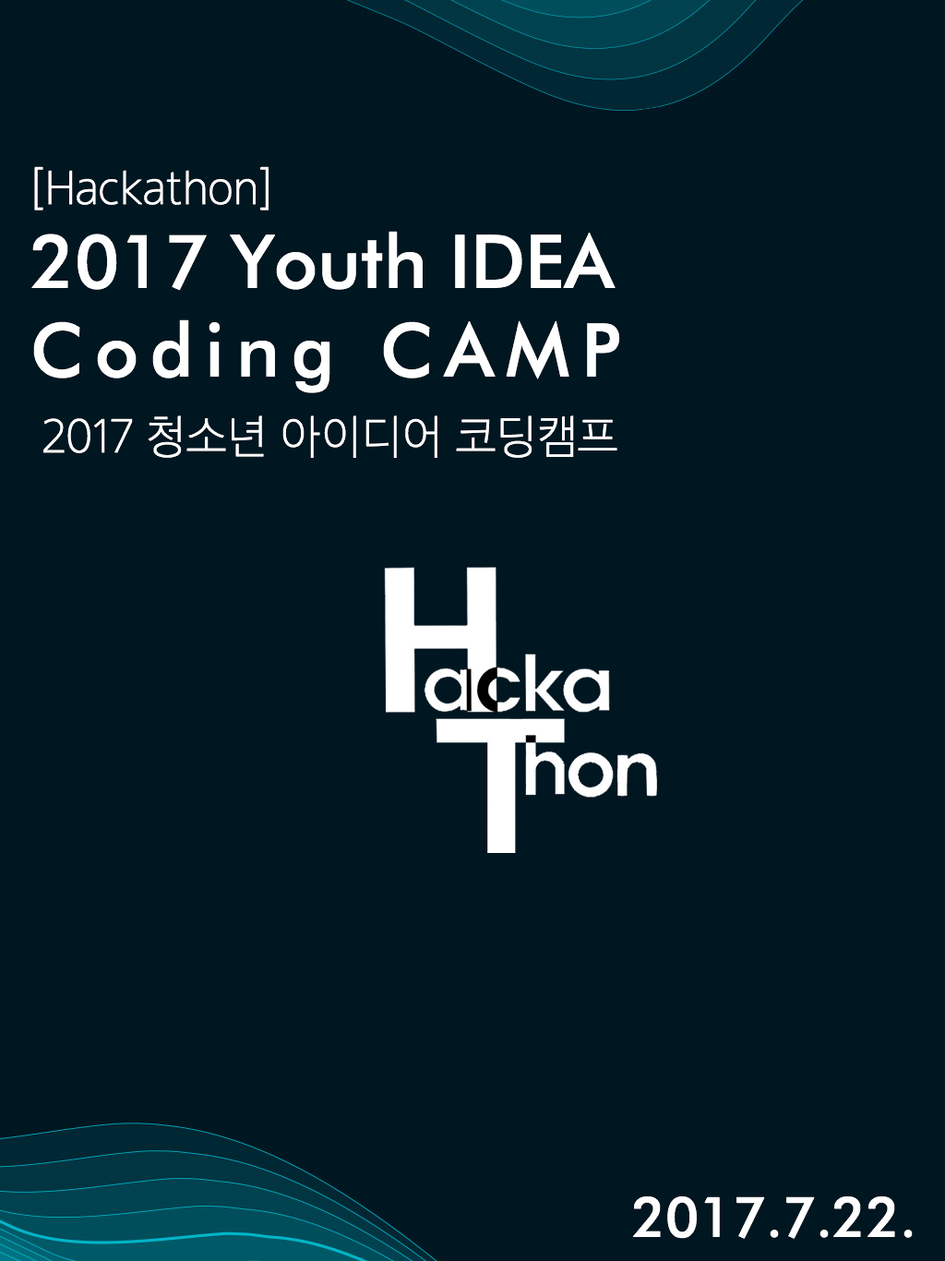
<style>
.page{position:relative;width:945px;height:1261px;background:#001621}
.page>*{position:absolute;margin:0}
.t1{font:44.3px "SECGCOTFUL";letter-spacing:0.02em;color:#ffffff}
.t2{font:73.9px "FuturaBT-Medium";color:#ffffff}
.t3{font:73.9px "FuturaBT-Medium";letter-spacing:0.16em;color:#ffffff}
.t4{font:55.4px "FuturaBT-Medium";color:#ffffff}
</style>
<div class="page">
<p class="t1" style="left:34px;top:166px;width:235px;height:45px">[Hackathon]</p>
<p class="t2" style="left:31px;top:231px;width:589px;height:162px">2017 Youth IDEA <br><span class="t3">Coding CAMP</span></p>
<p class="t1" style="left:43px;top:415px;width:575px;height:43px">2017 청소년 아이디어 코딩캠프</p>
<p class="t4" style="left:633px;top:1197px;width:280px;height:42px">2017.7.22.</p>
</div>
